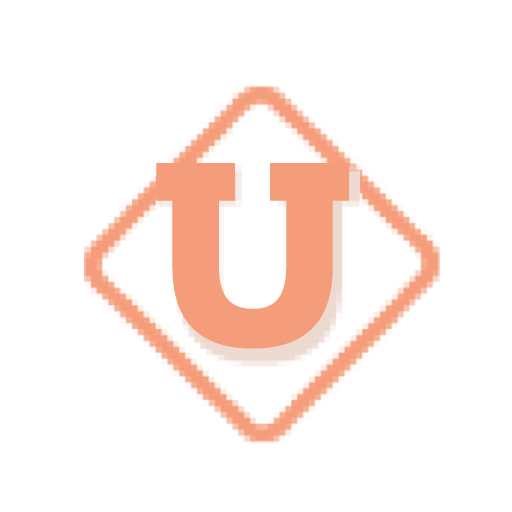
<style>
.page{position:relative;width:512px;height:512px;background:#ffffff}
.page>*{position:absolute;margin:0}
.t1{font:272.9px "ClabPersonalUse-Bold";letter-spacing:0.04em;color:#f59d7b}
</style>
<div class="page">
<p class="t1" style="left:156px;top:163px;width:193px;height:186px">U</p>
</div>
